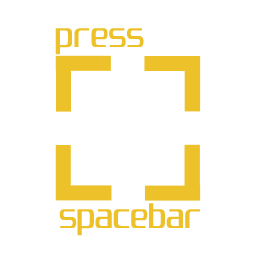
<style>
.page{position:relative;width:256px;height:256px;background:#ffffff}
.page>*{position:absolute;margin:0}
.t1{font:29.2px "Unispace-Regular";color:#ecc12a}
</style>
<div class="page">
<p class="t1" style="left:55px;top:28px;width:89px;height:27px">press</p>
<p class="t1" style="left:59px;top:203px;width:141px;height:33px">spacebar</p>
</div>
